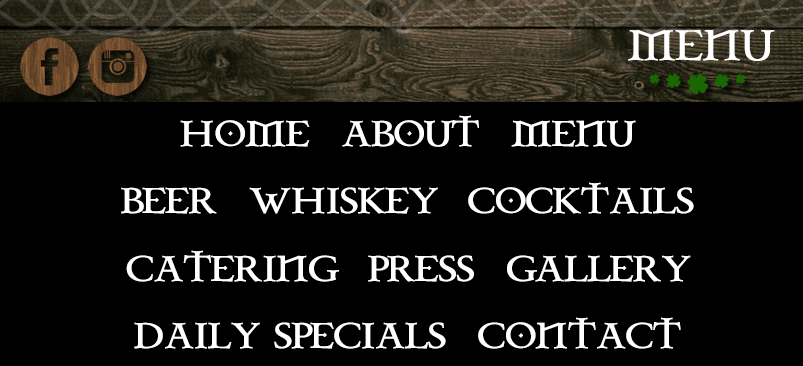
<style>
.page{position:relative;width:803px;height:366px;background:#000000}
.page>*{position:absolute;margin:0}
.t1{font:37.1px "CelticGaramondthe2nd";color:#ffffff;font-weight:bold}
.t2{font:31px/67.3px "CelticGaramondthe2nd";color:#ffffff;font-weight:bold}
</style>
<div class="page">
<p class="t1" style="left:628px;top:30px;width:147px;height:31px">MENU</p>
<p class="t2" style="left:121px;top:115px;width:573px;height:234px;text-align:center">HOME  ABOUT  MENU<br>BEER  WHISKEY  COCKTAILS<br>CATERING  PRESS  GALLERY<br>DAILY SPECIALS  CONTACT</p>
</div>
